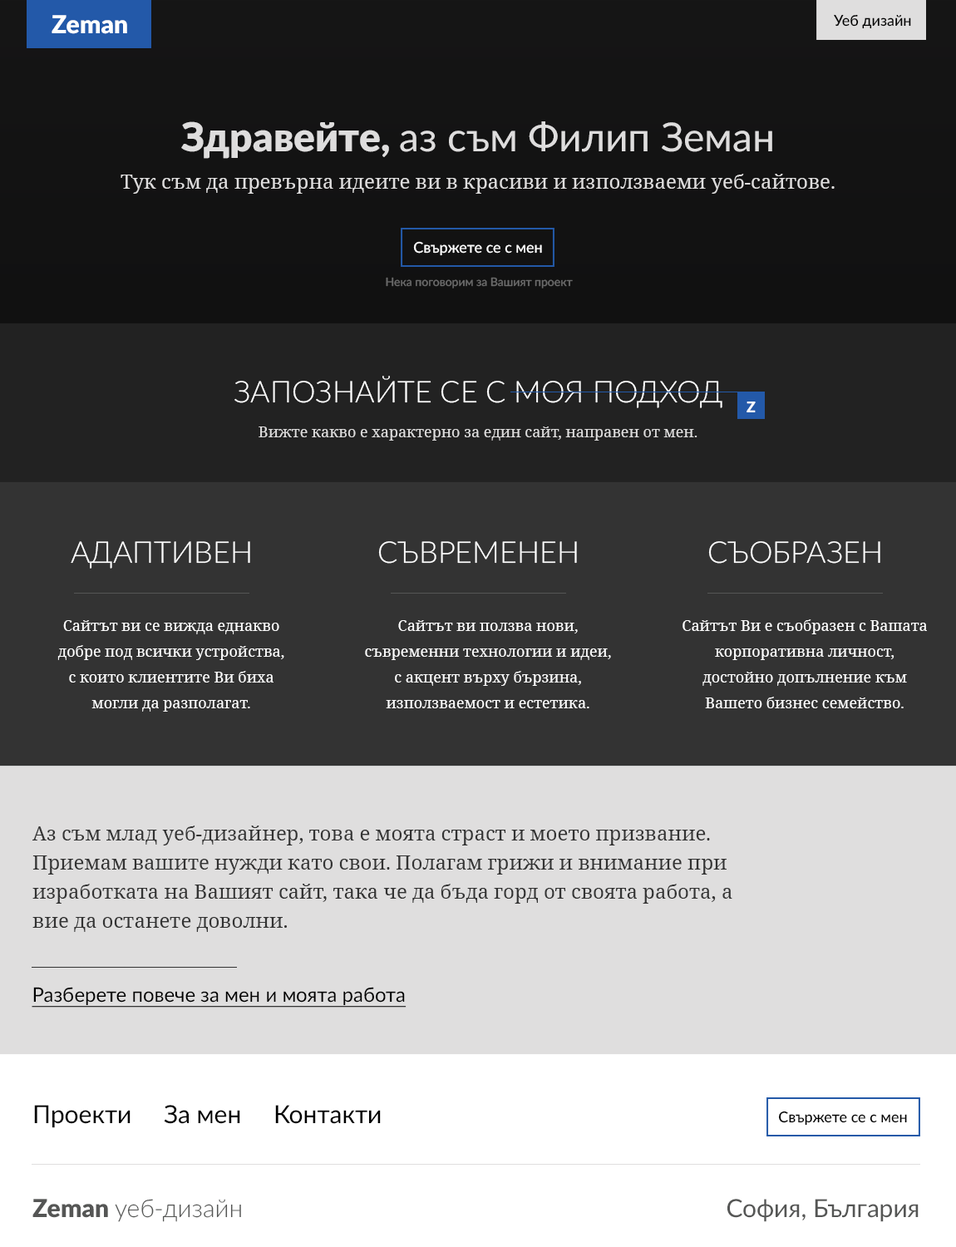
<style>
.page{position:relative;width:956px;height:1247px}
.page>*{position:absolute;margin:0}
.t1{font:24.9px "Lato-Black";color:#ffffff}
.t2{font:15px "Lato-Medium";color:#000000}
.t3{font:39.9px "Lato-Regular";color:#dedddd}
.t4{font:39.9px "Lato-Black";color:#dedddd}
.t5{font:20px "NotoSerif";color:#dfdede}
.t6{font:15px "Lato-Medium";color:#ffffff}
.t7{font:11.6px "Lato-Medium";color:#6b6b6b}
.t8{font:29.9px "Lato-Light";color:#ffffff;text-transform:uppercase}
.t9{font:15px "Lato-Black";color:#ffffff}
.t10{font:15px "NotoSerif";color:#dedddd}
.t11{font:29.9px "Lato-Light";color:#ffffff}
.t12{font:15px/25.8px "NotoSerif";color:#ffffff}
.t13{font:20px/29.1px "NotoSerif";color:#333333}
.t14{font:20px "Lato-Regular";color:#000000;text-decoration:underline}
.t15{font:24.9px "Lato-Regular";color:#000000}
.t16{font:24.9px "Lato-Light";color:#555655}
.t17{font:24.9px "Lato-Black";color:#555655}
.t18{font:24.9px "Lato-Regular";color:#555655}
</style>
<div class="page">
<p class="t1" style="left:52px;top:15px;width:75px;height:19px">Zeman</p>
<p class="t2" style="left:834px;top:14px;width:77px;height:15px">Уеб дизайн</p>
<p class="t3" style="left:181px;top:121px;width:591px;height:38px"><span class="t4">Здравейте, </span>аз съм Филип Земан</p>
<p class="t5" style="left:121px;top:174px;width:714px;height:20px">Тук съм да превърна идеите ви в красиви и използваеми уеб-сайтове.</p>
<p class="t6" style="left:413px;top:241px;width:129px;height:15px">Свържете се с мен</p>
<p class="t7" style="left:386px;top:277px;width:187px;height:12px">Нека поговорим за Вашият проект</p>
<p class="t8" style="left:234px;top:376px;width:489px;height:32px">Запознайте се с моя подход</p>
<p class="t9" style="left:747px;top:402px;width:9px;height:10px">Z</p>
<p class="t10" style="left:259px;top:427px;width:439px;height:14px">Вижте какво е характерно за един сайт, направен от мен.</p>
<p class="t11" style="left:71px;top:541px;width:179px;height:28px">АДАПТИВЕН</p>
<p class="t11" style="left:378px;top:541px;width:199px;height:23px">СЪВРЕМЕНЕН</p>
<p class="t11" style="left:708px;top:541px;width:172px;height:23px">СЪОБРАЗЕН</p>
<p class="t12" style="left:57px;top:620px;width:227px;height:92px;text-align:center">Сайтът ви се вижда еднакво добре под всички устройства, <br>с които клиентите Ви биха могли да разполагат.</p>
<p class="t12" style="left:365px;top:620px;width:246px;height:88px;text-align:center">Сайтът ви ползва нови, съвременни технологии и идеи, с акцент върху бързина, използваемост и естетика.</p>
<p class="t12" style="left:683px;top:619px;width:244px;height:89px;text-align:center">Сайтът Ви e съобразен с Вашата корпоративна личност, достойно допълнение към Вашето бизнес семейство.</p>
<p class="t13" style="left:32px;top:826px;width:700px;height:106px;text-align:right">Аз съм млад уеб-дизайнер, това е моята страст и моето призвание. <br>Приемам вашите нужди като свои. Полагам грижи и внимание при изработката на Вашият сайт, така че да бъда горд от своята работа, а вие да останете доволни.</p>
<p class="t14" style="left:32px;top:987px;width:375px;height:21px">Разберете повече за мен и моята работа</p>
<p class="t15" style="left:34px;top:1105px;width:347px;height:23px">Проекти     За мен     Контакти</p>
<p class="t2" style="left:778px;top:1111px;width:129px;height:15px">Свържете се с мен</p>
<p class="t16" style="left:32px;top:1199px;width:209px;height:23px"><span class="t17">Zeman </span>уеб-дизайн</p>
<p class="t18" style="left:727px;top:1199px;width:192px;height:23px">София, България</p>
</div>
